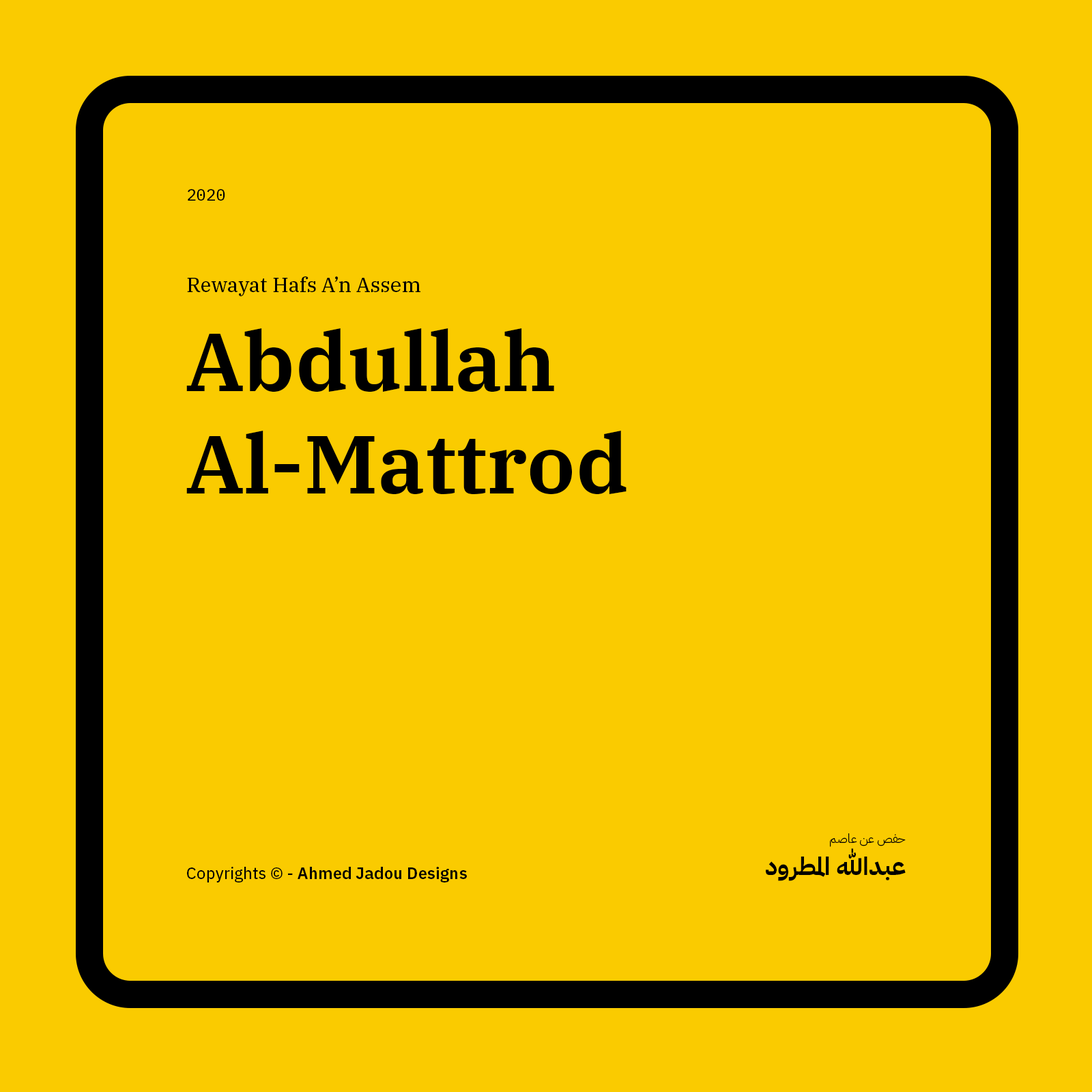
<style>
.page{position:relative;width:1092px;height:1092px;background:#facb00}
.page>*{position:absolute;margin:0}
.t1{font:16.4px "IBMPlexMono-Text";color:#000000}
.t2{font:20.5px "IBMPlexSerif-Text";color:#000000}
.t3{font:81.9px/102.7px "IBMPlexSerif-SemiBold";color:#000000}
.t4{font:12.3px "IBMPlexArabic-Light";color:#000000}
.t5{font:24.6px "IBMPlexArabic-Bold";color:#000000}
.t6{font:16.4px "IBMPlexSans-SemiBold";color:#000000}
.t7{font:16.4px "IBMPlexSans-Text";color:#000000}
</style>
<div class="page">
<p class="t1" style="left:188px;top:189px;width:37px;height:12px">2020</p>
<p class="t2" style="left:187px;top:276px;width:233px;height:20px">Rewayat Hafs A’n Assem</p>
<p class="t3" style="left:186px;top:328px;width:441px;height:166px">Abdullah Al-Mattrod</p>
<p class="t4" style="left:830px;top:833px;width:76px;height:14px">حفص عن عاصم</p>
<p class="t5" style="left:766px;top:848px;width:140px;height:33px">عبدالله المطرود</p>
<p class="t6" style="left:187px;top:867px;width:280px;height:15px"><span class="t7">Copyrights © - </span>Ahmed Jadou Designs</p>
</div>
